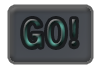
<style>
.page{position:relative;width:100px;height:69px;background:#ffffff}
.page>*{position:absolute;margin:0}
.t1{font:36px "BellGothicStd-Bold"}
</style>
<div class="page">
<p class="t1" style="left:23px;top:19px;width:54px;height:28px">GO!</p>
</div>
